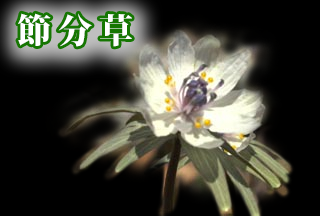
<style>
.page{position:relative;width:320px;height:216px;background:#000000}
.page>*{position:absolute;margin:0}
.t1{font:34px "KozMinPr6N-Heavy";letter-spacing:0.22em;color:#ffffff}
</style>
<div class="page">
<p class="t1" style="left:18px;top:13px;width:114px;height:34px">節分草</p>
</div>
